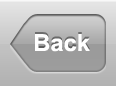
<style>
.page{position:relative;width:116px;height:86px}
.page>*{position:absolute;margin:0}
.t1{font:23.4px "Arial-BoldMT";color:#ffffff}
</style>
<div class="page">
<p class="t1" style="left:35px;top:34px;width:55px;height:18px">Back</p>
</div>
